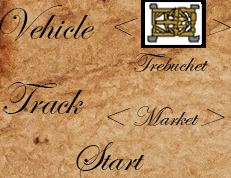
<style>
.page{position:relative;width:231px;height:178px}
.page>*{position:absolute;margin:0}
.t1{font:45.7px "EdwardianScriptITC";color:#000000}
.t2{font:27.4px "EdwardianScriptITC";color:#000000}
.t3{font:41.7px "EdwardianScriptITC";color:#000000}
</style>
<div class="page">
<p class="t1" style="left:0px;top:5px;width:95px;height:36px">Vehicle</p>
<p class="t2" style="left:134px;top:53px;width:74px;height:19px">Trebuchet</p>
<p class="t1" style="left:3px;top:82px;width:81px;height:32px">Track</p>
<p class="t1" style="left:107px;top:107px;width:118px;height:19px">&lt;         &gt;</p>
<p class="t2" style="left:134px;top:106px;width:65px;height:20px">Market</p>
<p class="t3" style="left:76px;top:142px;width:69px;height:36px">Start</p>
</div>
